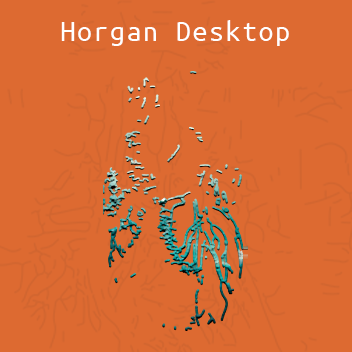
<style>
.page{position:relative;width:352px;height:352px;background:#dd6a31}
.page>*{position:absolute;margin:0}
.t1{font:30px "UbuntuMono-Regular";letter-spacing:0.05em;color:#ffffff}
</style>
<div class="page">
<p class="t1" style="left:61px;top:20px;width:228px;height:26px">Horgan Desktop</p>
</div>
